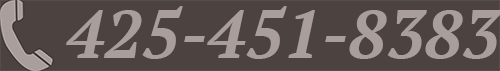
<style>
.page{position:relative;width:500px;height:71px;background:#4c4341}
.page>*{position:absolute;margin:0}
.t1{font:67.6px "PTSerif-BoldItalic";color:#a99e9c}
</style>
<div class="page">
<p class="t1" style="left:66px;top:6px;width:436px;height:53px">425-451-8383</p>
</div>
